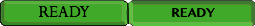
<style>
.page{position:relative;width:255px;height:26px;background:#41a92a}
.page>*{position:absolute;margin:0}
.t1{font:18px "Perpetua";color:#000000}
.t2{font:12px "MyanmarMN-Bold";color:#000000}
</style>
<div class="page">
<p class="t1" style="left:38px;top:5px;width:52px;height:12px">READY</p>
<p class="t2" style="left:172px;top:7px;width:43px;height:10px">READY</p>
</div>
